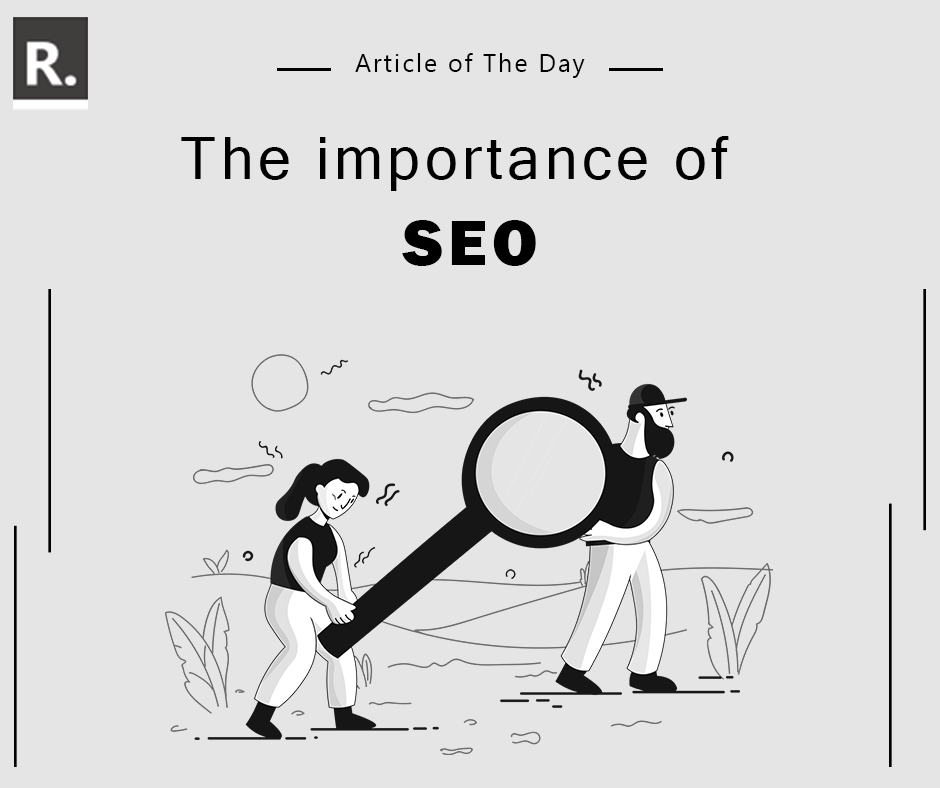
<style>
.page{position:relative;width:940px;height:788px;background:#e5e5e5}
.page>*{position:absolute;margin:0}
.t1{font:25px "SegoeUI";letter-spacing:0.08em;color:#000000}
.t2{font:58.7px/85.5px "MicrosoftSansSerif";letter-spacing:0.08em;color:#000000}
.t3{font:66px/85.5px "FranklinGothic-Heavy";letter-spacing:0.08em;color:#000000}
</style>
<div class="page">
<p class="t1" style="left:355px;top:53px;width:230px;height:25px">Article of The Day</p>
<p class="t2" style="left:181px;top:136px;width:548px;height:130px;text-align:right">The importance of<br><span class="t3">SEO</span></p>
</div>
